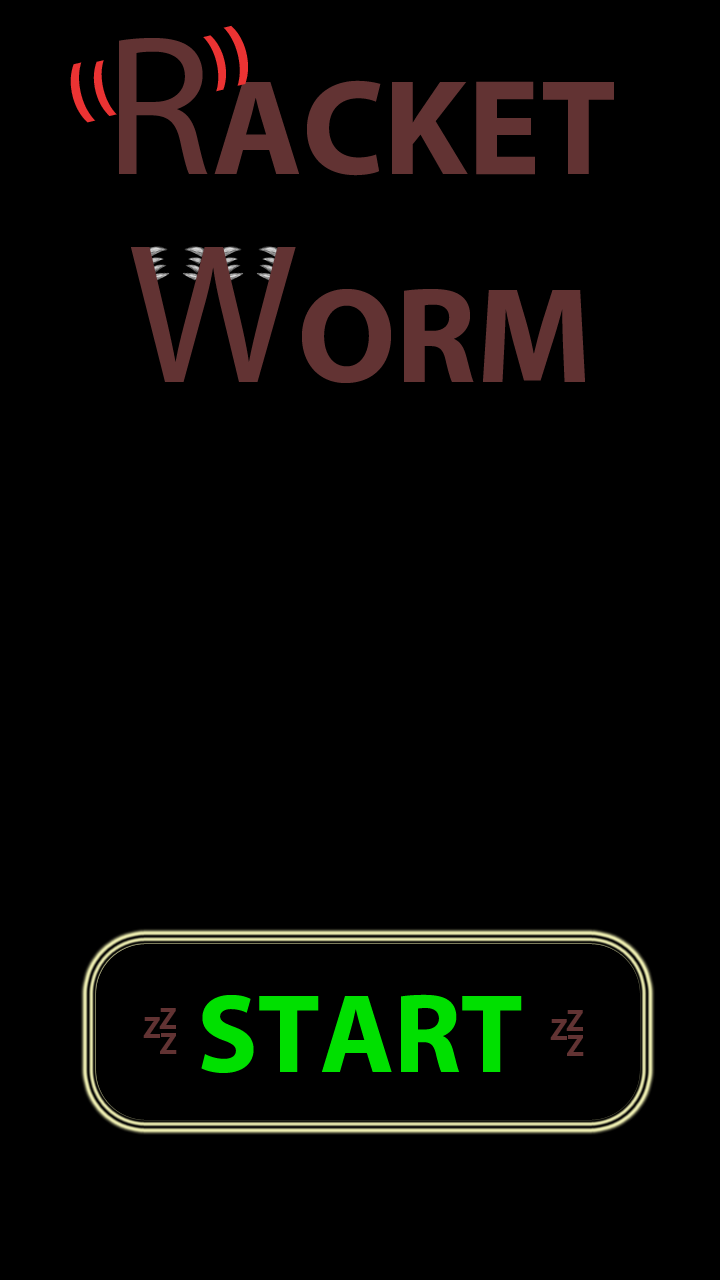
<style>
.page{position:relative;width:720px;height:1280px;background:#000000}
.page>*{position:absolute;margin:0}
.t1{font:69px "MyriadPro-Bold";color:#eb3333}
.t2{font:74px "MyriadPro-Bold";color:#eb3333}
.t3{font:137px "MyriadPro-Bold";color:#623333}
.t4{font:200px "MyriadPro-Regular";color:#623333}
.t5{font:113px "MyriadPro-Bold";color:#00e000}
</style>
<div class="page">
<p class="t1" style="left:70px;top:25px;width:178px;height:98px;rotate:-13deg"><span class="t2">(</span>(       )<span class="t2">)</span></p>
<p class="t3" style="left:119px;top:38px;width:495px;height:138px"><span class="t4">R</span>ACKET</p>
<p class="t3" style="left:131px;top:247px;width:454px;height:136px"><span class="t4">W</span>ORM</p>
<p class="t5" style="left:201px;top:994px;width:321px;height:79px">START</p>
</div>
